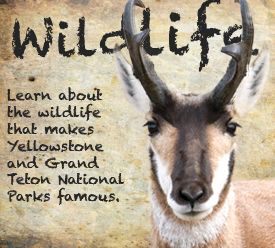
<style>
.page{position:relative;width:275px;height:248px}
.page>*{position:absolute;margin:0}
.t1{font:14px "Chalkduster";color:#252525}
.t2{font:36px "MyriadPro-Regular";color:#252525}
</style>
<div class="page">
<p class="t1" style="left:7px;top:87px;width:118px;height:118px"><span class="t2"><br> <br><br></span>Learn about <br>the wildlife <br>that makes <br>Yellowstone <br>and Grand <br>Teton National<br>Parks famous.</p>
</div>
